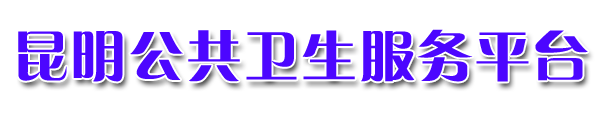
<style>
.page{position:relative;width:600px;height:121px;background:#ffffff}
.page>*{position:absolute;margin:0}
.t1{font:55px "FZCQJW--GB1-0";letter-spacing:0.05em;color:#4c06ff}
</style>
<div class="page">
<p class="t1" style="left:18px;top:29px;width:570px;height:53px">昆明公共卫生服务平台</p>
</div>
